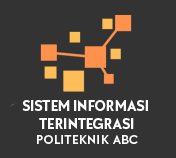
<style>
.page{position:relative;width:176px;height:158px;background:#333333}
.page>*{position:absolute;margin:0}
.t1{font:15px "Galatea-Bold";color:#ffffff}
.t2{font:13px "Galatea-Medium";letter-spacing:0.05em;color:#ffffff}
</style>
<div class="page">
<p class="t1" style="left:22px;top:100px;width:126px;height:44px;text-align:center">SISTEM INFORMASI <br>TERINTEGRASI<br><span class="t2">POLITEKNIK ABC</span></p>
</div>
